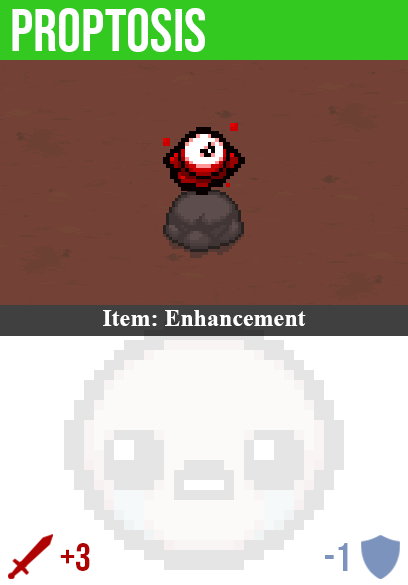
<style>
.page{position:relative;width:408px;height:585px;background:#734136}
.page>*{position:absolute;margin:0}
.t1{font:60px "BebasNeue-Regular";color:#ffffff}
.t2{font:24px "TimesNewRomanPS-BoldMT";color:#ffffff}
.t3{font:40px "BebasNeue-Regular";color:#af0202}
.t4{font:40px "BebasNeue-Regular";color:#7c94bd}
</style>
<div class="page">
<p class="t1" style="left:12px;top:8px;width:193px;height:44px">proptosis</p>
<p class="t2" style="left:103px;top:310px;width:203px;height:16px">Item: Enhancement</p>
<p class="t3" style="left:60px;top:543px;width:30px;height:28px">+3</p>
<p class="t4" style="left:325px;top:543px;width:23px;height:28px">-1</p>
</div>
